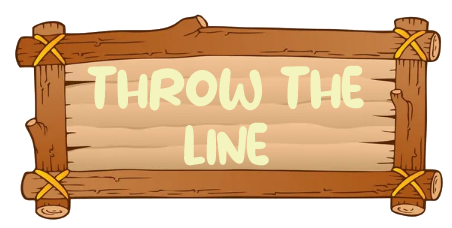
<style>
.page{position:relative;width:452px;height:228px;background:#ffffff}
.page>*{position:absolute;margin:0}
.t1{font:48px "Water-Galon";color:#f4f4be}
</style>
<div class="page">
<p class="t1" style="left:87px;top:65px;width:277px;height:101px;text-align:center">THROW THE<br>LINE</p>
</div>
